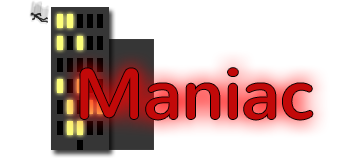
<style>
.page{position:relative;width:347px;height:164px;background:#ffffff}
.page>*{position:absolute;margin:0}
.t1{font:72px "Nunito-Regular";color:#c10808}
</style>
<div class="page">
<p class="t1" style="left:80px;top:68px;width:233px;height:52px">Maniac</p>
</div>
